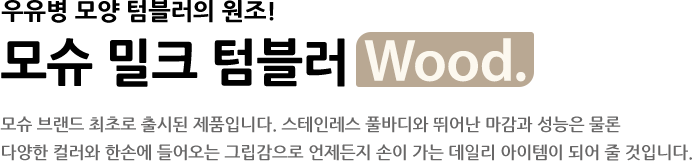
<style>
.page{position:relative;width:692px;height:161px;background:#ffffff}
.page>*{position:absolute;margin:0}
.t1{font:24px "NanumGothicExtraBold";letter-spacing:-0.01em;color:#000000}
.t2{font:50px "NanumGothicExtraBold";letter-spacing:-0.02em;color:#000000}
.t3{font:60px "MyriadConceptRoman-Semibold";letter-spacing:-0.01em;color:#fcf8ef}
.t4{font:17px/28px "NanumGothicBold";letter-spacing:-0.01em;color:#686767}
</style>
<div class="page">
<p class="t1" style="left:1px;top:0px;width:273px;height:23px">우유병 모양 텀블러의 원조!</p>
<p class="t2" style="left:1px;top:38px;width:344px;height:49px">모슈 밀크 텀블러</p>
<p class="t3" style="left:364px;top:38px;width:162px;height:44px">Wood.</p>
<p class="t4" style="left:0px;top:116px;width:692px;height:45px">모슈 브랜드 최초로 출시된 제품입니다. 스테인레스 풀바디와 뛰어난 마감과 성능은 물론<br>다양한 컬러와 한손에 들어오는 그립감으로 언제든지 손이 가는 데일리 아이템이 되어 줄 것입니다.</p>
</div>
